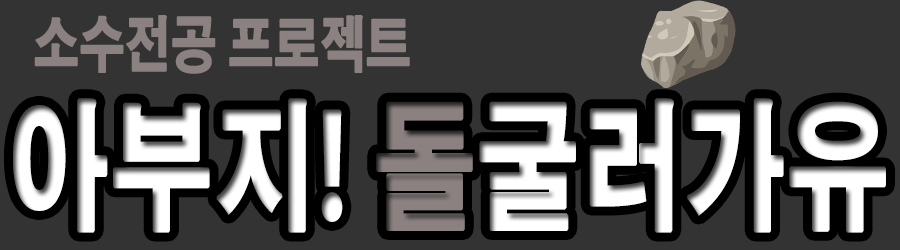
<style>
.page{position:relative;width:900px;height:250px;background:#333333}
.page>*{position:absolute;margin:0}
.t1{font:60.1px "AdobeGothicStd-Bold";color:#8b8181;font-weight:bold;scale:0.74 1}
.t2{font:139.1px "AdobeGothicStd-Bold";color:#ffffff;font-weight:bold;scale:0.72 1}
.t3{font:139.1px "AdobeGothicStd-Bold";color:#8b8181;font-weight:bold;scale:0.72 1}
</style>
<div class="page">
<p class="t1" style="left:34px;top:15px;width:376px;height:59px">소수전공 프로젝트</p>
<p class="t2" style="left:13px;top:98px;width:873px;height:135px">아부지! <span class="t3">돌</span>굴러가유</p>
</div>
